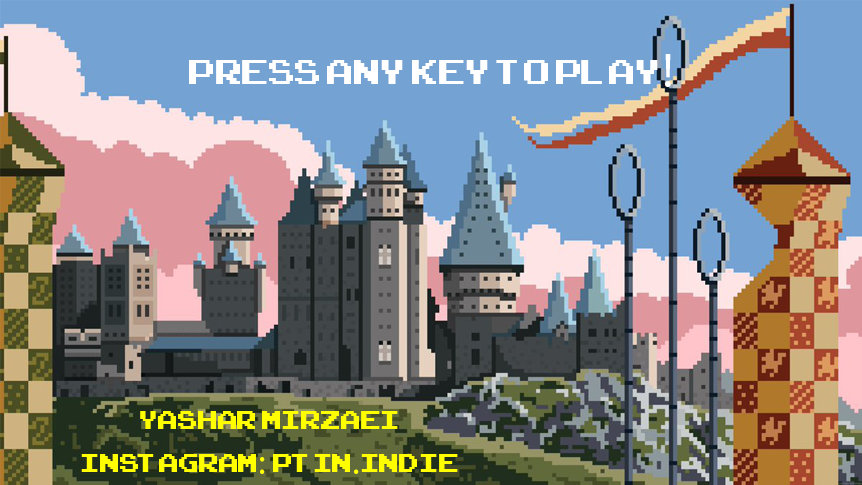
<style>
.page{position:relative;width:862px;height:485px;background:#74a2d3}
.page>*{position:absolute;margin:0}
.t1{font:48px "ArcadeClassic";color:#ffffff}
.t2{font:48px "MyriadPro-Regular";color:#ffffff}
.t3{font:36px "ArcadeClassic";color:#ffff00}
.t4{font:36px "MyriadPro-Regular";color:#ffff00}
</style>
<div class="page">
<p class="t1" style="left:189px;top:54px;width:482px;height:33px">Press any key to play<span class="t2">!</span></p>
<p class="t3" style="left:81px;top:411px;width:377px;height:63px;text-align:center">Yashar Mirzaei<br>Instagram<span class="t4">: </span>ptin<span class="t4">.</span>indie</p>
</div>
